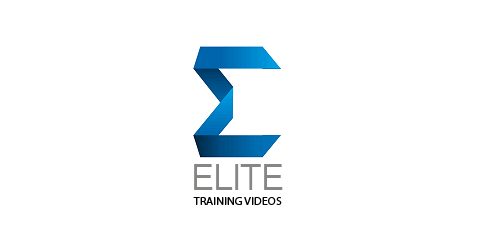
<style>
.page{position:relative;width:500px;height:250px;background:#ffffff}
.page>*{position:absolute;margin:0}
.t1{font:35.3px "KannadaSangamMN";color:#878685;text-transform:uppercase}
.t2{font:11.9px "MyriadPro-Regular";color:#030303;text-transform:uppercase}
</style>
<div class="page">
<p class="t1" style="left:194px;top:164px;width:89px;height:26px">ELITE</p>
<p class="t2" style="left:193px;top:197px;width:89px;height:8px">TRAINING VIDEOS</p>
</div>
